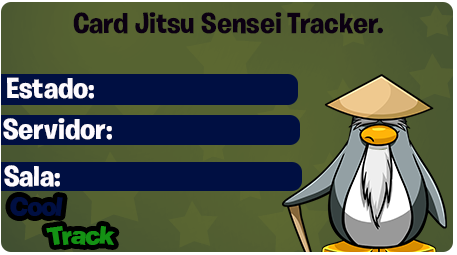
<style>
.page{position:relative;width:457px;height:255px}
.page>*{position:absolute;margin:0}
.t1{font:29px "BurbankBigRegular-Bold";color:#0c0012}
.t2{font:29px "BurbankBigRegular-Bold";color:#fdfafe}
</style>
<div class="page">
<p class="t1" style="left:73px;top:12px;width:310px;height:22px">Card Jitsu Sensei Tracker.</p>
<p class="t2" style="left:7px;top:77px;width:87px;height:22px">Estado:</p>
<p class="t2" style="left:3px;top:118px;width:109px;height:22px">Servidor:</p>
<p class="t2" style="left:4px;top:165px;width:56px;height:22px">Sala:</p>
</div>
